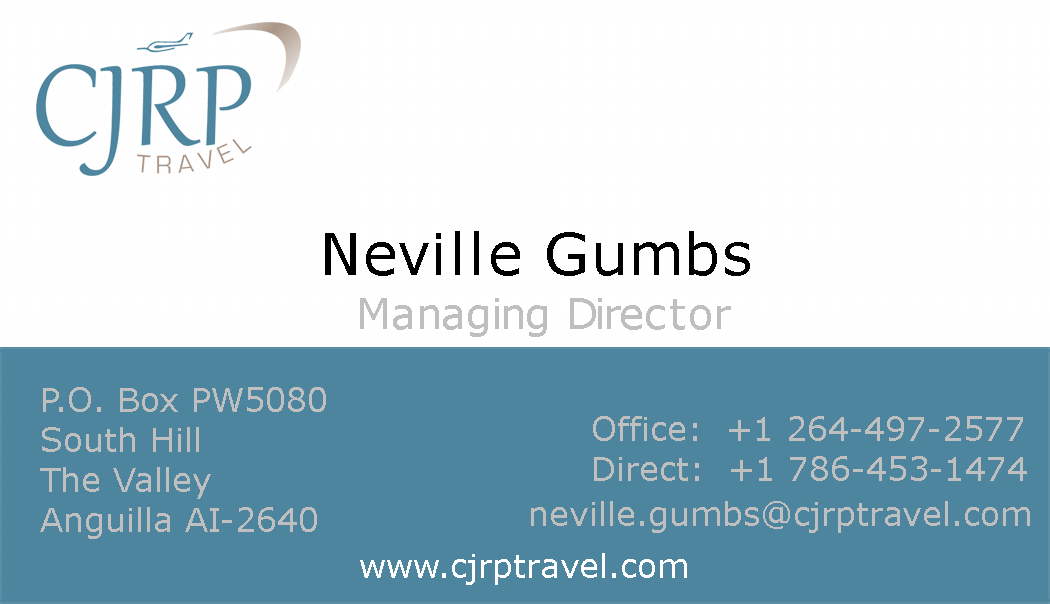
<style>
.page{position:relative;width:1050px;height:604px;background:#ffffff}
.page>*{position:absolute;margin:0}
.t1{font:58.4px "Verdana";color:#000000}
.t2{font:41.7px "Verdana";color:#c0bfbf}
.t3{font:33.3px "Verdana";color:#c0bfbf}
.t4{font:33.3px "Verdana";color:#ffffff}
</style>
<div class="page">
<p class="t1" style="left:325px;top:231px;width:425px;height:45px">Neville Gumbs</p>
<p class="t2" style="left:360px;top:298px;width:371px;height:39px">Managing Director</p>
<p class="t3" style="left:40px;top:387px;width:286px;height:152px">P.O. Box PW5080 <br>South Hill<br>The Valley <br>Anguilla AI-2640</p>
<p class="t3" style="left:593px;top:416px;width:434px;height:65px">Office:  +1 264-497-2577 <br>Direct:  +1 786-453-1474</p>
<p class="t3" style="left:531px;top:501px;width:499px;height:32px">neville.gumbs@cjrptravel.com</p>
<p class="t4" style="left:360px;top:553px;width:327px;height:32px">www.cjrptravel.com</p>
</div>
